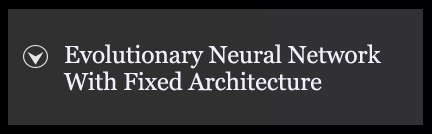
<style>
.page{position:relative;width:432px;height:134px;background:#313030}
.page>*{position:absolute;margin:0}
.t1{font:24.5px/9px "Georgia";letter-spacing:-0.005em;color:#f0effb}
</style>
<div class="page">
<p class="t1" style="left:63px;top:44px;width:318px;height:47px">Evolutionary Neural Network <br><br><br>With Fixed Architecture</p>
</div>
